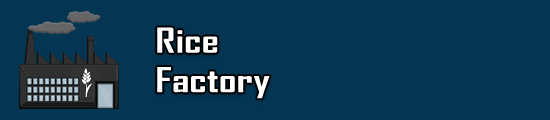
<style>
.page{position:relative;width:550px;height:120px;background:#043654}
.page>*{position:absolute;margin:0}
.t1{font:32.9px "AgencyFB-Bold";color:#ffffff;scale:1.33 1}
</style>
<div class="page">
<p class="t1" style="left:157px;top:27px;width:113px;height:72px">Rice <br>Factory</p>
</div>
